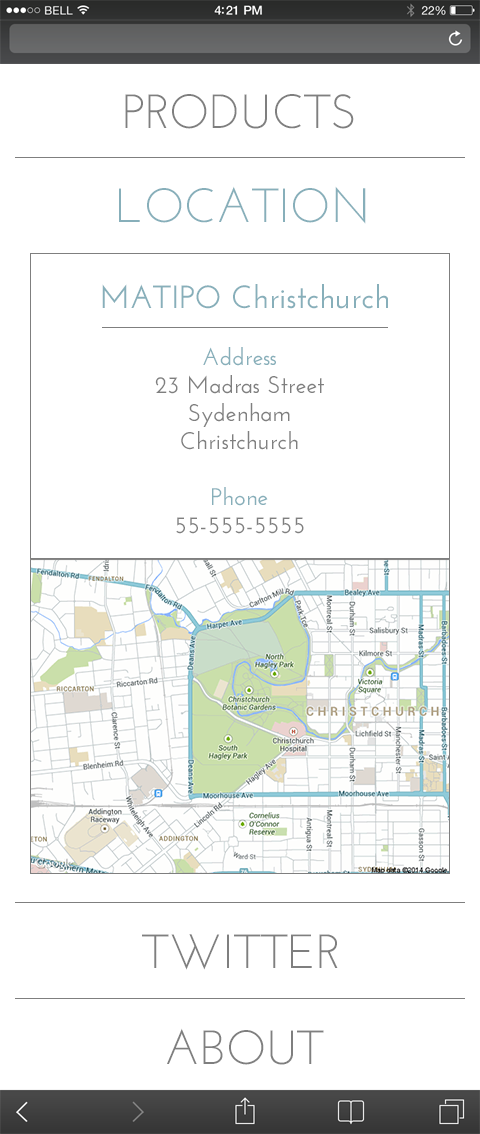
<style>
.page{position:relative;width:480px;height:1134px;background:#ffffff}
.page>*{position:absolute;margin:0}
.t1{font:48px "JosefinSans";color:#7f7f7f}
.t2{font:48px "JosefinSans";color:#87afba}
.t3{font:32px "JosefinSans-SemiBold";color:#87afba}
.t4{font:24px/28px "JosefinSans-SemiBold";color:#7f7f7f}
.t5{font:24px/28px "JosefinSans-SemiBold";color:#87afba}
</style>
<div class="page">
<p class="t1" style="left:125px;top:94px;width:229px;height:35px">PRODUCTS</p>
<p class="t2" style="left:119px;top:186px;width:247px;height:38px">LOCATION</p>
<p class="t3" style="left:102px;top:284px;width:286px;height:25px">MATIPO Christchurch</p>
<p class="t4" style="left:155px;top:347px;width:169px;height:187px;text-align:center"><span class="t5">Address<br></span>23 Madras Street<br>Sydenham<br>Christchurch<br><br><span class="t5">Phone<br></span>55-555-5555</p>
<p class="t1" style="left:142px;top:934px;width:196px;height:36px">TWITTER</p>
<p class="t1" style="left:167px;top:1028px;width:157px;height:37px">ABOUT</p>
</div>
